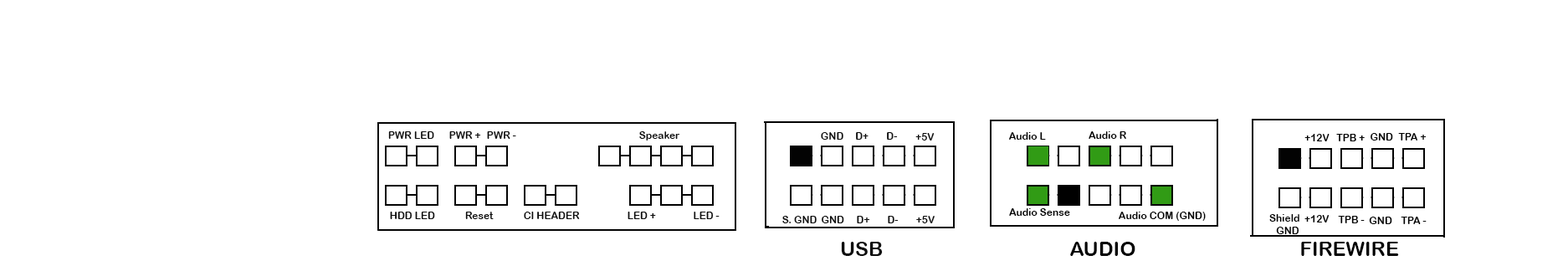
<style>
.page{position:relative;width:1568px;height:271px;background:#ffffff}
.page>*{position:absolute;margin:0}
.t1{font:10px "ArialRoundedMTBold";color:#000000}
.t2{font:10px "ArialRoundedMTBold";color:#020202}
.t3{font:20.1px "ArialRoundedMTBold";color:#000000}
.t4{font:20.1px "ArialRoundedMTBold";color:#020202}
</style>
<div class="page">
<p class="t1" style="left:388px;top:131px;width:46px;height:8px">PWR LED</p>
<p class="t1" style="left:449px;top:131px;width:32px;height:8px">PWR +</p>
<p class="t1" style="left:487px;top:131px;width:29px;height:8px">PWR -</p>
<p class="t1" style="left:639px;top:131px;width:41px;height:10px">Speaker</p>
<p class="t1" style="left:821px;top:132px;width:22px;height:8px">GND</p>
<p class="t1" style="left:856px;top:132px;width:13px;height:8px">D+</p>
<p class="t1" style="left:887px;top:132px;width:11px;height:8px">D-</p>
<p class="t1" style="left:915px;top:133px;width:20px;height:8px">+5V</p>
<p class="t1" style="left:1009px;top:132px;width:37px;height:8px">Audio L</p>
<p class="t1" style="left:1089px;top:131px;width:37px;height:8px">Audio R</p>
<p class="t2" style="left:1304px;top:134px;width:26px;height:7px">+12V</p>
<p class="t2" style="left:1336px;top:134px;width:29px;height:7px">TPB +</p>
<p class="t2" style="left:1371px;top:133px;width:22px;height:8px">GND</p>
<p class="t2" style="left:1398px;top:133px;width:29px;height:8px">TPA +</p>
<p class="t1" style="left:1009px;top:208px;width:61px;height:8px">Audio Sense</p>
<p class="t1" style="left:390px;top:212px;width:45px;height:7px">HDD LED</p>
<p class="t1" style="left:465px;top:212px;width:29px;height:7px">Reset</p>
<p class="t1" style="left:524px;top:212px;width:56px;height:7px">CI HEADER</p>
<p class="t1" style="left:628px;top:212px;width:28px;height:7px">LED +</p>
<p class="t1" style="left:694px;top:212px;width:26px;height:7px">LED -</p>
<p class="t1" style="left:782px;top:216px;width:35px;height:7px">S. GND</p>
<p class="t1" style="left:822px;top:216px;width:22px;height:7px">GND</p>
<p class="t1" style="left:857px;top:216px;width:13px;height:7px">D+</p>
<p class="t1" style="left:888px;top:216px;width:11px;height:7px">D-</p>
<p class="t1" style="left:916px;top:216px;width:19px;height:7px">+5V</p>
<p class="t1" style="left:1119px;top:212px;width:87px;height:9px">Audio COM (GND)</p>
<p class="t2" style="left:1269px;top:214px;width:30px;height:8px">Shield</p>
<p class="t2" style="left:1304px;top:215px;width:26px;height:8px">+12V</p>
<p class="t2" style="left:1338px;top:216px;width:27px;height:7px">TPB -</p>
<p class="t2" style="left:1369px;top:217px;width:23px;height:7px">GND</p>
<p class="t2" style="left:1401px;top:217px;width:26px;height:7px">TPA -</p>
<p class="t2" style="left:1276px;top:227px;width:23px;height:7px">GND</p>
<p class="t3" style="left:841px;top:242px;width:42px;height:14px">USB</p>
<p class="t4" style="left:1070px;top:242px;width:65px;height:14px">AUDIO</p>
<p class="t4" style="left:1301px;top:242px;width:98px;height:14px">FIREWIRE</p>
</div>
